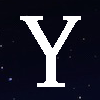
<style>
.page{position:relative;width:100px;height:100px}
.page>*{position:absolute;margin:0}
.t1{font:95.5px "AdobeFangsongStd-Regular";letter-spacing:-0.05em;color:#ffffff;font-weight:bold}
</style>
<div class="page">
<p class="t1" style="left:20px;top:16px;width:61px;height:71px">Y</p>
</div>
